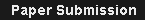
<style>
.page{position:relative;width:145px;height:20px;background:#1a1a1a}
.page>*{position:absolute;margin:0}
.t1{font:14px "Arial-BoldMT";color:#ebebeb}
</style>
<div class="page">
<p class="t1" style="left:12px;top:5px;width:124px;height:13px">Paper Submission</p>
</div>
